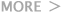
<style>
.page{position:relative;width:62px;height:13px;background:#ffffff}
.page>*{position:absolute;margin:0}
.t1{font:14px "LucidaSansUnicode";color:#a6a6a6;font-weight:bold}
.t2{font:18px "LucidaSansUnicode";color:#a6a6a6;font-weight:bold}
</style>
<div class="page">
<p class="t1" style="left:1px;top:1px;width:60px;height:11px">MORE<span class="t2"> &gt;</span></p>
</div>
